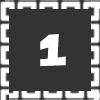
<style>
.page{position:relative;width:100px;height:100px;background:#333333}
.page>*{position:absolute;margin:0}
.t1{font:48px "Chunq";color:#ffffff}
</style>
<div class="page">
<p class="t1" style="left:40px;top:34px;width:26px;height:32px">1</p>
</div>
